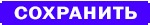
<style>
.page{position:relative;width:150px;height:25px;background:#4800ff}
.page>*{position:absolute;margin:0}
.t1{font:18.1px "FranklinGothic-Demi";letter-spacing:0.03em;color:#ffffff;scale:1.2 1}
</style>
<div class="page">
<p class="t1" style="left:14px;top:6px;width:123px;height:14px">СОХРАНИТЬ</p>
</div>
